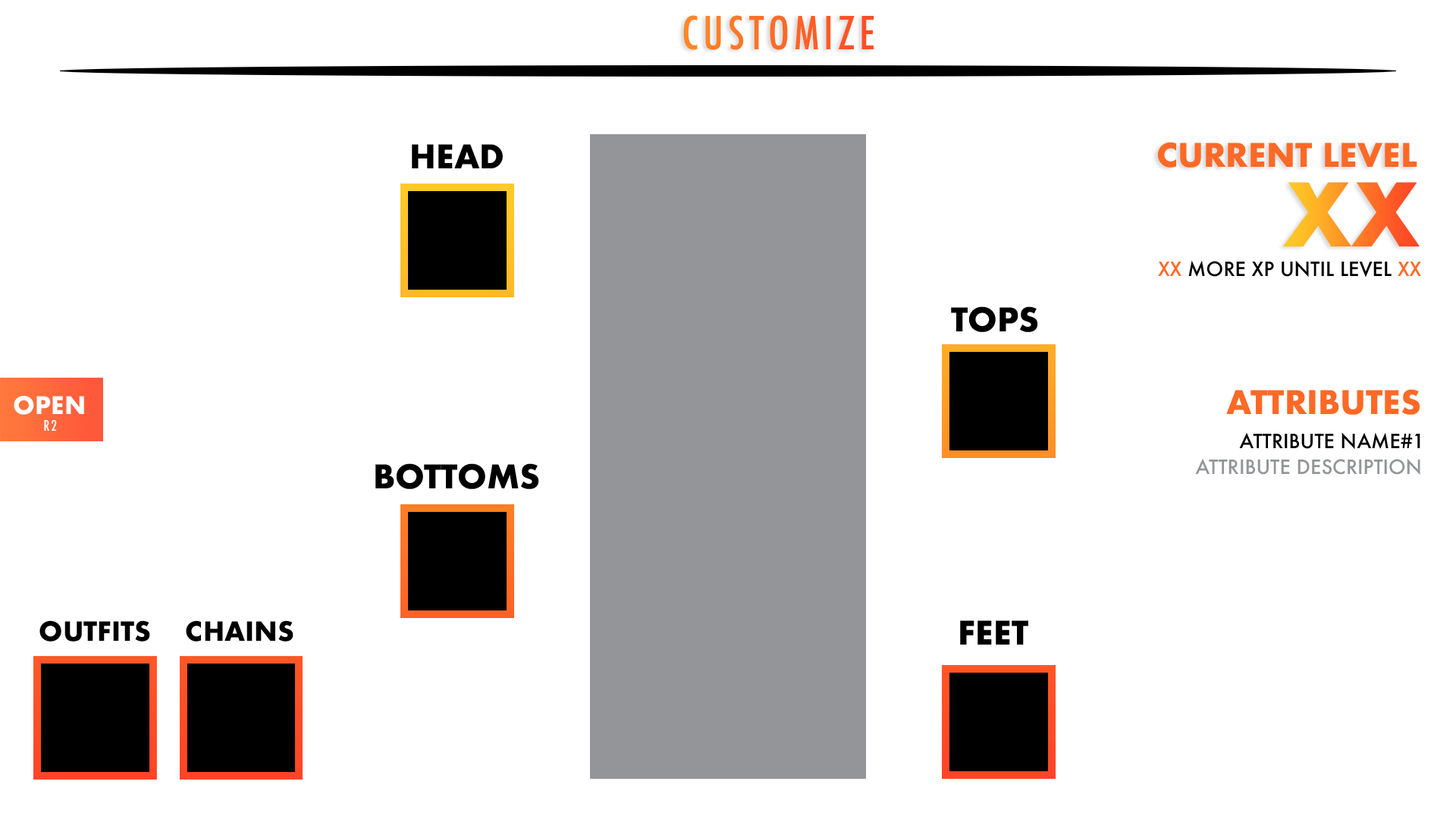
<style>
.page{position:relative;width:1456px;height:819px;background:#ffffff}
.page>*{position:absolute;margin:0}
.t1{font:44.2px "Futura-CondensedMedium";letter-spacing:0.1em}
.t2{font:31.6px "Futura-Bold";color:#000000}
.t3{font:31.6px "Futura-Bold";color:#ff6926}
.t4{font:85.2px "Futura-Bold"}
.t5{font:19.2px "Futura-Medium";color:#000000}
.t6{font:19.2px "Futura-Medium";color:#ff6926}
.t7{font:23.6px "Futura-Bold";color:#ffffff}
.t8{font:14.1px "Futura-CondensedMedium";letter-spacing:0.1em;color:#ffffff}
.t9{font:19.2px "Futura-Medium";color:#939598}
.t10{font:25.7px "Futura-Bold";color:#000000}
</style>
<div class="page">
<p class="t1" style="left:683px;top:15px;width:191px;height:35px">CUSTOMIZE</p>
<p class="t2" style="left:412px;top:144px;width:91px;height:24px">HEAD</p>
<p class="t3" style="left:1158px;top:142px;width:259px;height:26px">CURRENT LEVEL</p>
<p class="t4" style="left:1283px;top:182px;width:137px;height:64px">XX</p>
<p class="t5" style="left:1158px;top:260px;width:263px;height:18px"><span class="t6">XX</span> MORE XP UNTIL LEVEL <span class="t6">XX</span></p>
<p class="t2" style="left:951px;top:306px;width:87px;height:26px">TOPS</p>
<p class="t3" style="left:1226px;top:389px;width:194px;height:26px">ATTRIBUTES</p>
<p class="t7" style="left:14px;top:396px;width:70px;height:19px">OPEN</p>
<p class="t8" style="left:44px;top:419px;width:13px;height:12px">R2</p>
<p class="t5" style="left:1239px;top:432px;width:181px;height:17px">ATTRIBUTE NAME#1</p>
<p class="t9" style="left:1195px;top:458px;width:225px;height:17px">ATTRIBUTE DESCRIPTION</p>
<p class="t2" style="left:375px;top:463px;width:164px;height:26px">BOTTOMS</p>
<p class="t10" style="left:39px;top:620px;width:111px;height:22px">OUTFITS</p>
<p class="t10" style="left:186px;top:620px;width:107px;height:22px">CHAINS</p>
<p class="t2" style="left:960px;top:620px;width:68px;height:25px">FEET</p>
</div>
